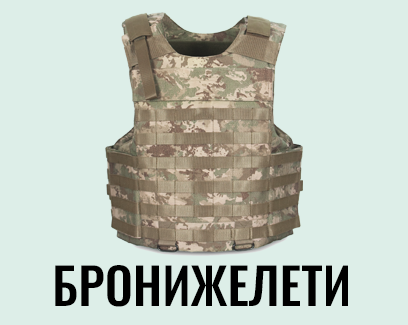
<style>
.page{position:relative;width:408px;height:325px;background:#ddeee8}
.page>*{position:absolute;margin:0}
.t1{font:50px "Oswald-Medium";color:#000000}
</style>
<div class="page">
<p class="t1" style="left:55px;top:265px;width:293px;height:42px">БРОНИЖЕЛЕТИ</p>
</div>
